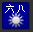
<style>
.page{position:relative;width:33px;height:32px;background:#000090}
.page>*{position:absolute;margin:0}
.t1{font:10.4px "SimSun";color:#ffffff}
</style>
<div class="page">
<p class="t1" style="left:5px;top:4px;width:20px;height:9px">六八</p>
</div>
